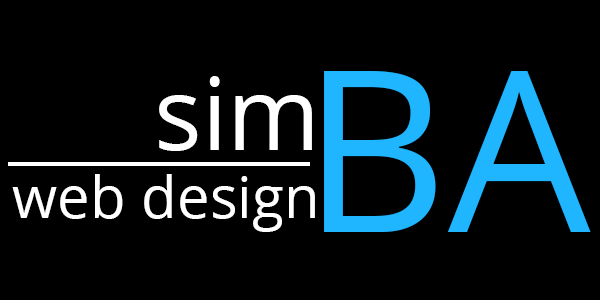
<style>
.page{position:relative;width:600px;height:300px;background:#000000}
.page>*{position:absolute;margin:0}
.t1{font:100px "OpenSans";color:#ffffff}
.t2{font:225px "OpenSans";color:#1fb6ff}
.t3{font:58.3px "OpenSans";color:#ffffff}
</style>
<div class="page">
<p class="t1" style="left:159px;top:76px;width:153px;height:75px">sim</p>
<p class="t2" style="left:324px;top:71px;width:267px;height:161px">BA</p>
<p class="t3" style="left:12px;top:174px;width:303px;height:58px">web design</p>
</div>
